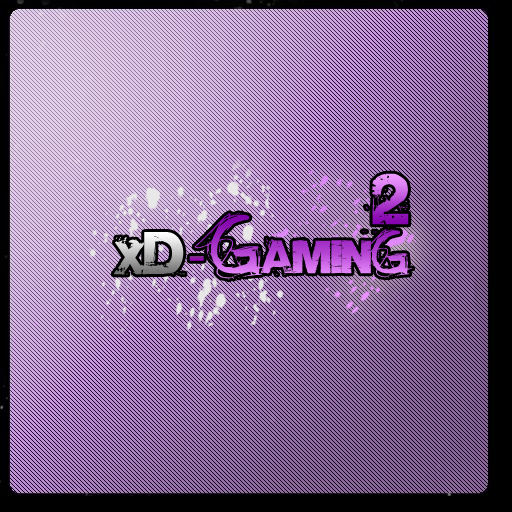
<style>
.page{position:relative;width:512px;height:512px}
.page>*{position:absolute;margin:0}
.t1{font:62px "Base02"}
.t2{font:41px "Base05"}
.t3{font:56px "AllOverAgainAllCaps"}
.t4{font:41px "Base02"}
.t5{font:41px "AllOverAgain"}
.t6{font:53px "Base02"}
.t7{font:53px "BellGothicStd-Bold";color:#871b9a}
</style>
<div class="page">
<p class="t1" style="left:362px;top:173px;width:47px;height:60px">2</p>
<p class="t2" style="left:194px;top:213px;width:219px;height:67px"><span class="t3">G</span><span class="t4">a</span>min<span class="t5">G</span></p>
<p class="t4" style="left:113px;top:232px;width:72px;height:43px">x<span class="t6">D</span></p>
<p class="t7" style="left:189px;top:256px;width:15px;height:5px">-</p>
</div>
